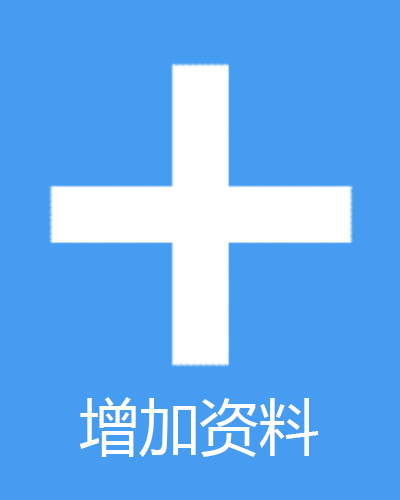
<style>
.page{position:relative;width:400px;height:500px;background:#469cf1}
.page>*{position:absolute;margin:0}
.t1{font:60px "MicrosoftYaHei";color:#ffffff}
</style>
<div class="page">
<p class="t1" style="left:79px;top:397px;width:240px;height:60px">增加资料</p>
</div>
